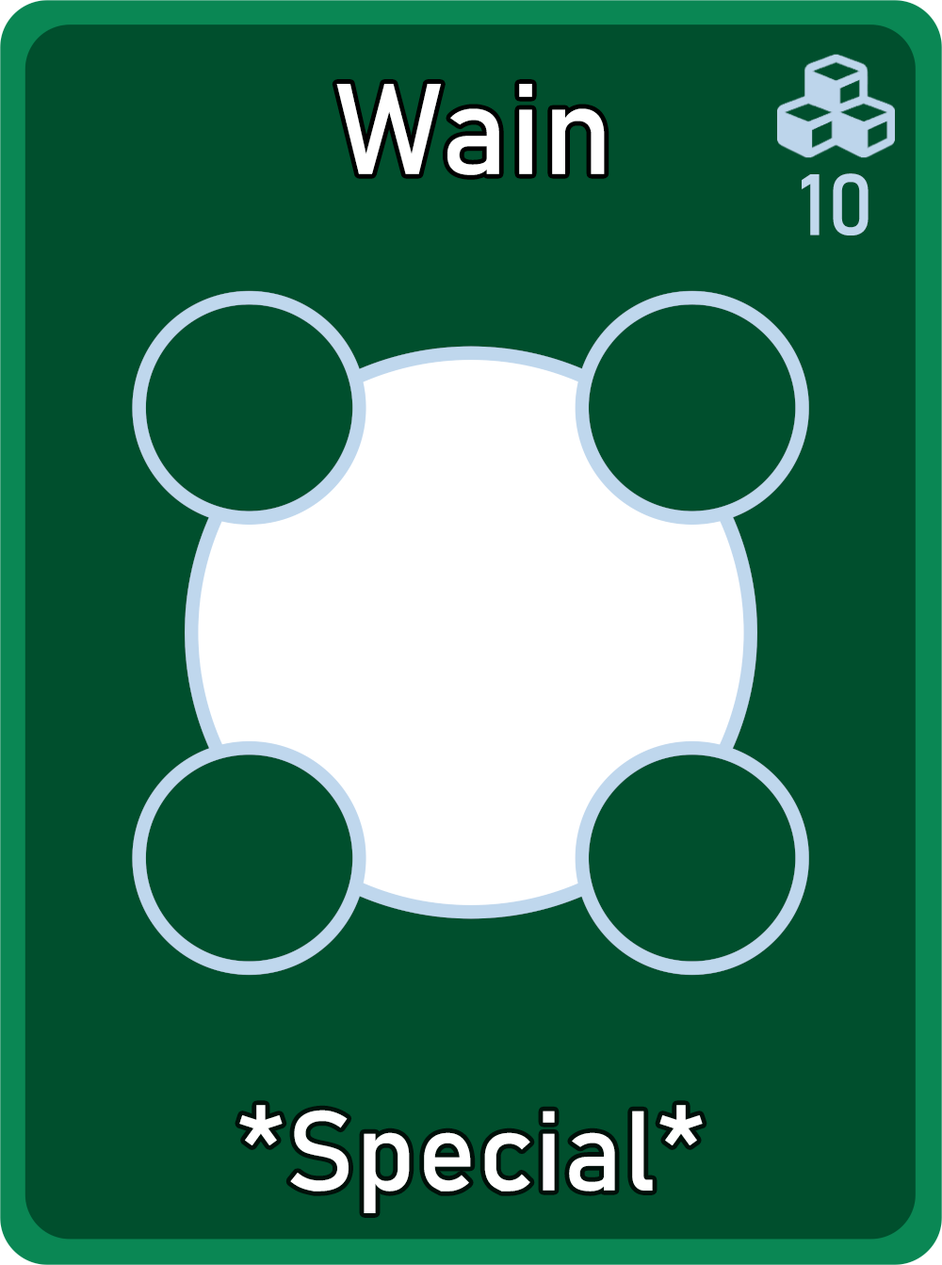
<style>
.page{position:relative;width:942px;height:1265px;background:#004f2d}
.page>*{position:absolute;margin:0}
.t1{font:126.7px "Bahnschrift";letter-spacing:0.01em;color:#ffffff}
.t2{font:85px "Bahnschrift";letter-spacing:0.01em;color:#c1d8ed}
.t3{font:111.3px "Bahnschrift";letter-spacing:0.01em;color:#ffffff}
</style>
<div class="page">
<p class="t1" style="left:336px;top:84px;width:269px;height:91px">Wain</p>
<p class="t2" style="left:802px;top:173px;width:67px;height:63px">10</p>
<p class="t3" style="left:239px;top:1105px;width:464px;height:109px">*Special*</p>
</div>
